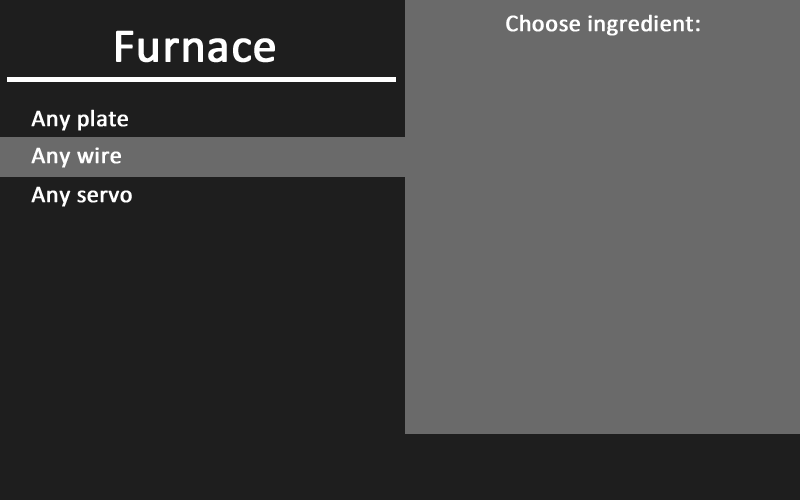
<style>
.page{position:relative;width:800px;height:500px;background:#1e1e1e}
.page>*{position:absolute;margin:0}
.t1{font:24px "Calibri";color:#ffffff;font-weight:bold}
.t2{font:48px "Calibri";color:#ffffff;font-weight:bold}
</style>
<div class="page">
<p class="t1" style="left:506px;top:14px;width:194px;height:22px">Choose ingredient:</p>
<p class="t2" style="left:116px;top:30px;width:159px;height:33px">Furnace</p>
<p class="t1" style="left:31px;top:109px;width:97px;height:22px">Any plate</p>
<p class="t1" style="left:31px;top:147px;width:90px;height:21px">Any wire</p>
<p class="t1" style="left:31px;top:186px;width:101px;height:21px">Any servo</p>
</div>
